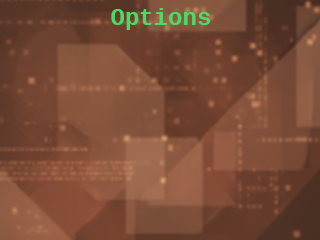
<style>
.page{position:relative;width:320px;height:240px}
.page>*{position:absolute;margin:0}
.t1{font:24px "LiterationMonoPowerline-Bold";color:#44de65}
</style>
<div class="page">
<p class="t1" style="left:111px;top:8px;width:99px;height:22px">Options</p>
</div>
